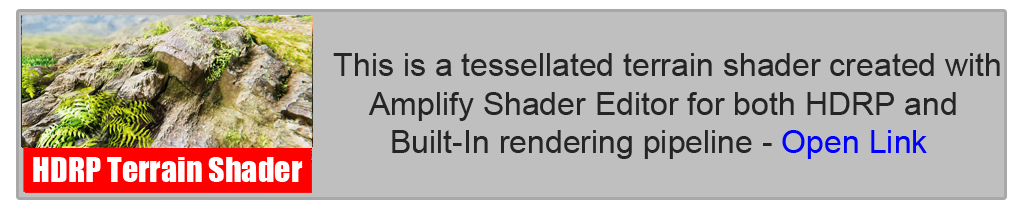
<style>
.page{position:relative;width:1024px;height:210px;background:#bfbfbf}
.page>*{position:absolute;margin:0}
.t1{font:32px "ArialMT";color:#252525}
.t2{font:32px "ArialMT";color:#0000ff}
.t3{font:32px "Impact";color:#ffffff}
</style>
<div class="page">
<p class="t1" style="left:333px;top:53px;width:667px;height:106px;text-align:center">This is a tessellated terrain shader created with <br>Amplify Shader Editor for both HDRP and<br> Built-In rendering pipeline - <span class="t2">Open Link</span></p>
<p class="t3" style="left:33px;top:157px;width:270px;height:25px">HDRP Terrain Shader</p>
</div>
